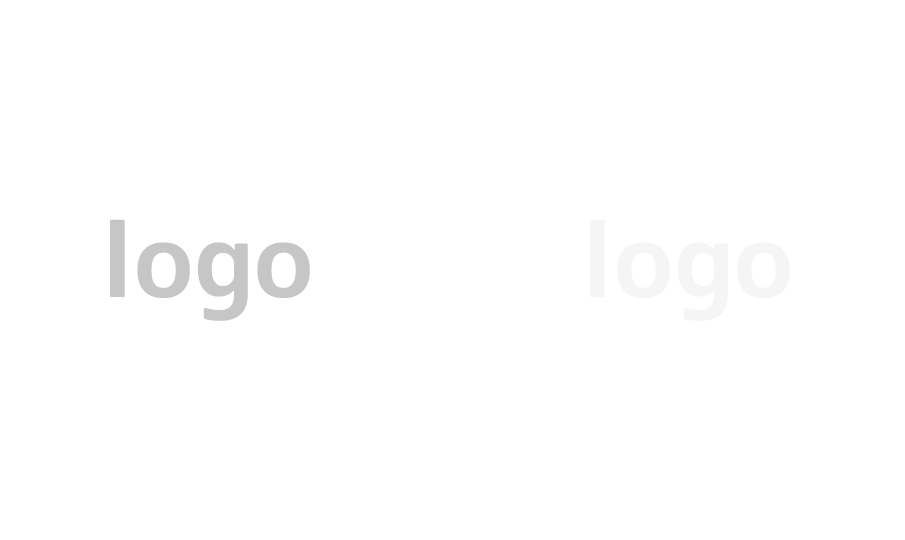
<style>
.page{position:relative;width:905px;height:540px;background:#ffffff}
.page>*{position:absolute;margin:0}
.t1{font:103px "07YasashisaGothicBold";color:#c6c6c6}
.t2{font:103px "07YasashisaGothicBold";color:#f5f5f5}
</style>
<div class="page">
<p class="t1" style="left:110px;top:219px;width:200px;height:102px">logo</p>
<p class="t2" style="left:590px;top:219px;width:200px;height:102px">logo</p>
</div>
